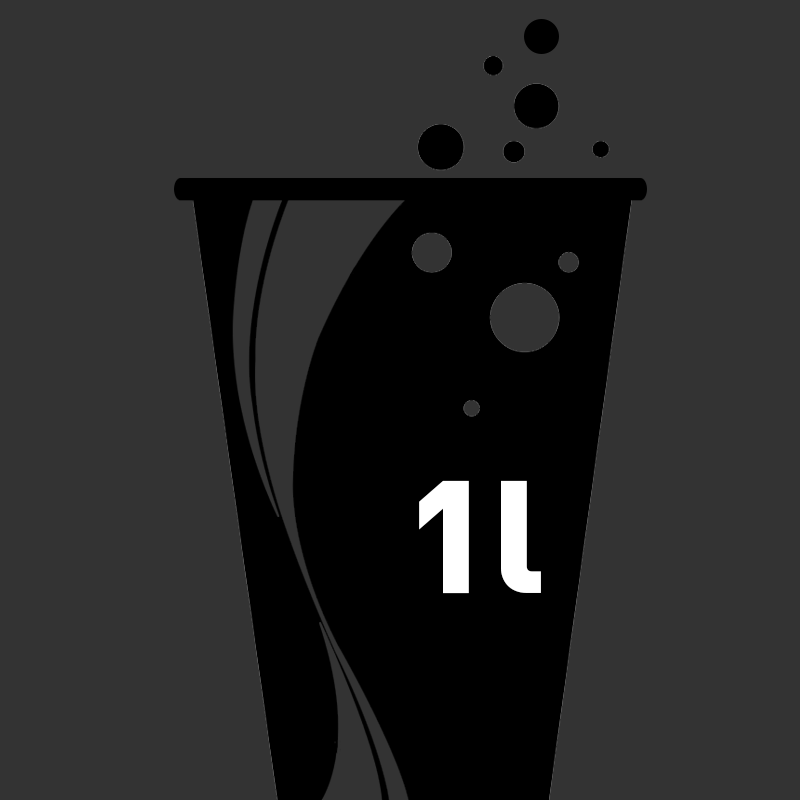
<style>
.page{position:relative;width:800px;height:800px;background:#333333}
.page>*{position:absolute;margin:0}
.t1{font:156.6px "DIN-Black";color:#ffffff}
</style>
<div class="page">
<p class="t1" style="left:419px;top:480px;width:122px;height:114px">1l</p>
</div>
